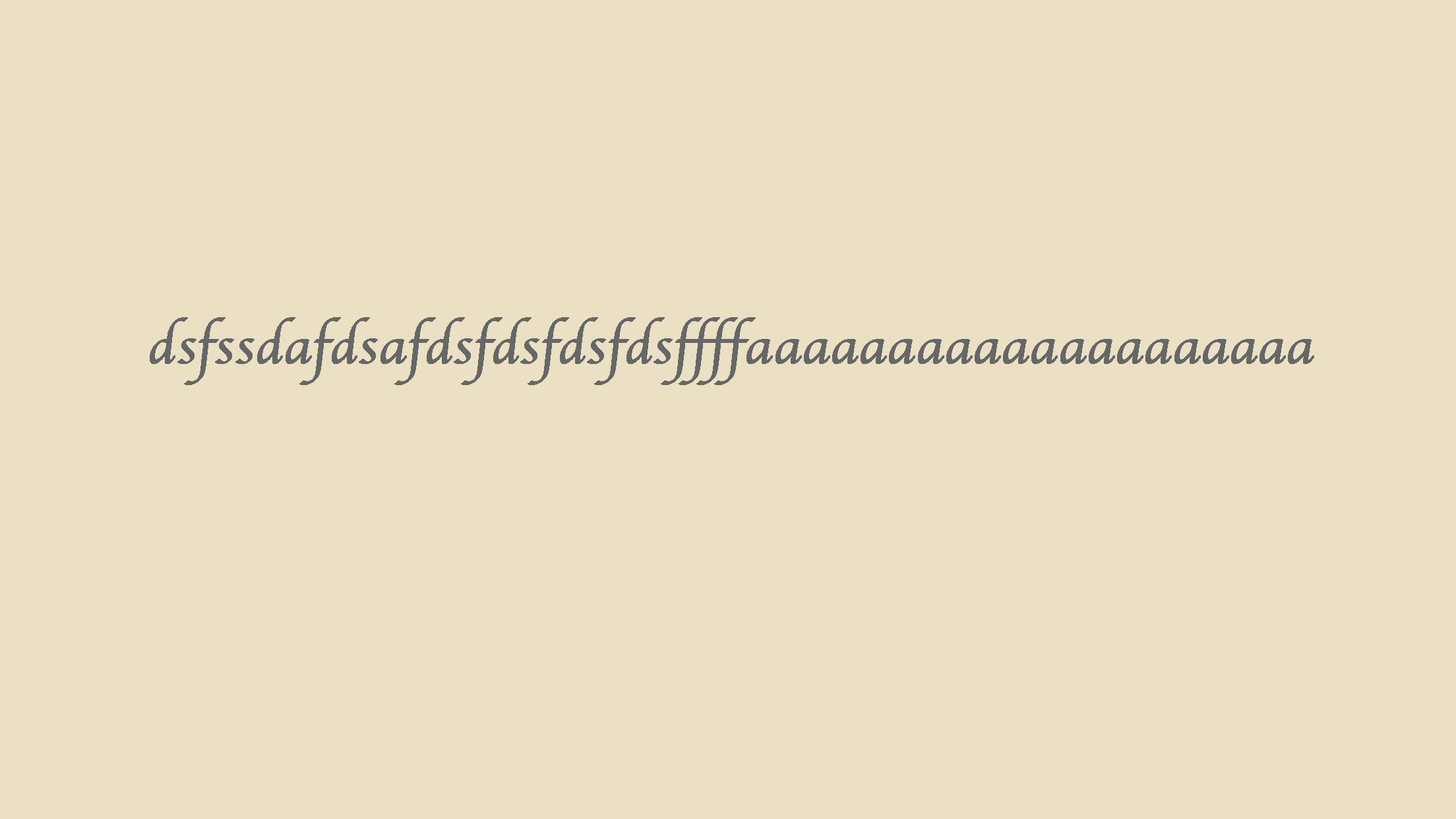
<style>
.page{position:relative;width:1456px;height:819px;background:#ebe0c4}
.page>*{position:absolute;margin:0}
.t1{font:52.8px "Apple-Chancery";color:#666768;font-weight:bold}
</style>
<div class="page">
<p class="t1" style="left:150px;top:317px;width:1164px;height:68px">dsfssdafdsafdsfdsfdsfdsffffaaaaaaaaaaaaaaaaaaaa</p>
</div>
